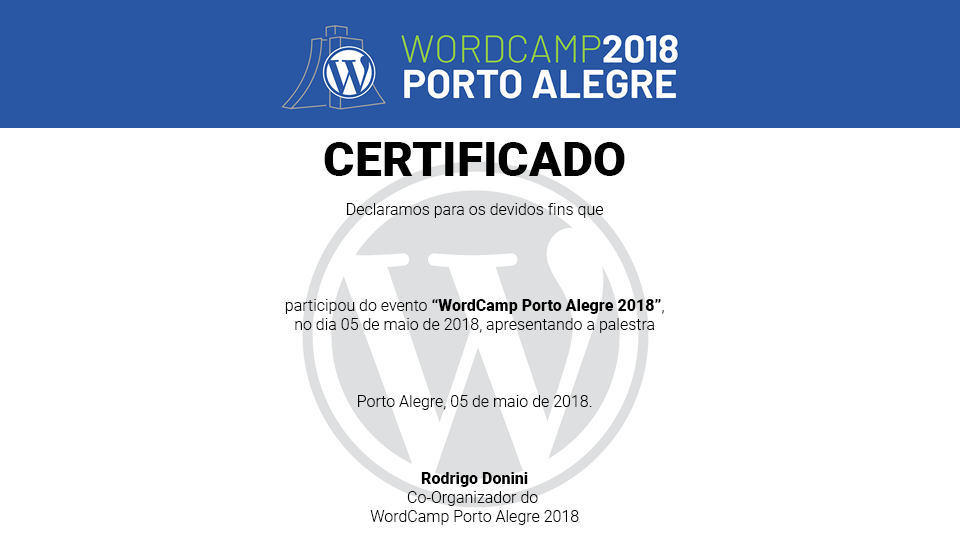
<style>
.page{position:relative;width:960px;height:540px;background:#ffffff}
.page>*{position:absolute;margin:0}
.t1{font:16px "Roboto-Light";color:#010101}
.t2{font:48px "Roboto-Black";color:#010101}
.t3{font:16px "Roboto-Black";color:#010101}
</style>
<div class="page">
<p class="t1" style="left:285px;top:142px;width:379px;height:383px;text-align:center"><span class="t2">CERTIFICADO<br><br></span>Declaramos para os devidos fins que<br><br><br><br><br>participou do evento <span class="t3">“WordCamp Porto Alegre 2018”</span>,<br>no dia 05 de maio de 2018, apresentando a palestra<br><br><br><br>Porto Alegre, 05 de maio de 2018.<br><br><br><br><span class="t3">Rodrigo Donini<br></span>Co-Organizador do <br>WordCamp Porto Alegre 2018</p>
</div>
